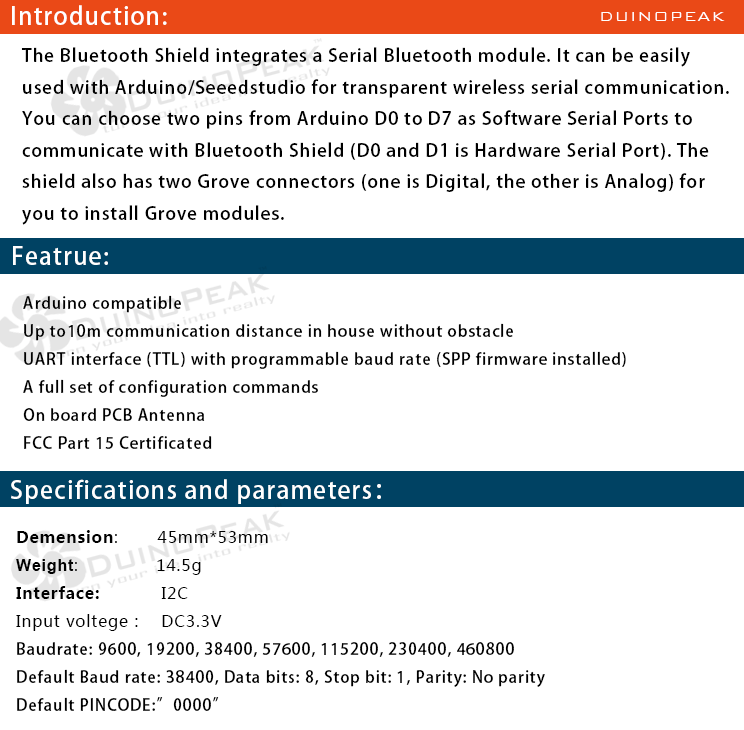
<style>
.page{position:relative;width:744px;height:730px;background:#ffffff}
.page>*{position:absolute;margin:0}
.t1{font:24px "AdobeHeitiStd-Regular";letter-spacing:0.05em;color:#ffffff}
.t2{font:18px "BankGothicBT-Light";letter-spacing:0.05em;color:#ffffff}
.t3{font:18px "AdobeHeitiStd-Regular";letter-spacing:0.05em;color:#000000}
.t4{font:16px "AdobeHeitiStd-Regular";letter-spacing:0.05em;color:#000000}
.t5{font:16px "MicrosoftYaHei-Bold";letter-spacing:0.05em;color:#000000}
.t6{font:16px "MicrosoftYaHei";letter-spacing:0.05em;color:#000000}
.t7{font:16px "Arial-BoldMT";letter-spacing:0.05em;color:#000000}
</style>
<div class="page">
<p class="t1" style="left:12px;top:5px;width:155px;height:20px">Introduction:</p>
<p class="t2" style="left:601px;top:12px;width:124px;height:9px">DUINOPEAK</p>
<p class="t3" style="left:21px;top:47px;width:708px;height:178px">The Bluetooth Shield integrates a Serial Bluetooth module. It can be easily <br>used with Arduino/Seeedstudio for transparent wireless serial communication. <br>You can choose two pins from Arduino D0 to D7 as Software Serial Ports to <br>communicate with Bluetooth Shield (D0 and D1 is Hardware Serial Port). The <br>shield also has two Grove connectors (one is Digital, the other is Analog) for <br>you to install Grove modules.</p>
<p class="t1" style="left:13px;top:246px;width:95px;height:19px">Featrue:</p>
<p class="t4" style="left:23px;top:295px;width:603px;height:154px">Arduino compatible<br>Up to10m communication distance in house without obstacle<br>UART interface (TTL) with programmable baud rate (SPP firmware installed)<br>A full set of configuration commands<br>On board PCB Antenna<br>FCC Part 15 Certificated</p>
<p class="t1" style="left:11px;top:479px;width:370px;height:25px">Specifications and parameters：</p>
<p class="t4" style="left:16px;top:530px;width:529px;height:181px"><span class="t5">Demension</span><span class="t6">:       45mm*53mm<br></span><span class="t7">Weight</span><span class="t6">:              14.5g<br></span><span class="t5">Interface:           </span><span class="t6">I2C<br>Input voltege :    DC3.3V<br></span>Baudrate: 9600, 19200, 38400, 57600, 115200, 230400, 460800<br>Default Baud rate: 38400, Data bits: 8, Stop bit: 1, Parity: No parity<br>Default PINCODE:”0000”</p>
</div>
